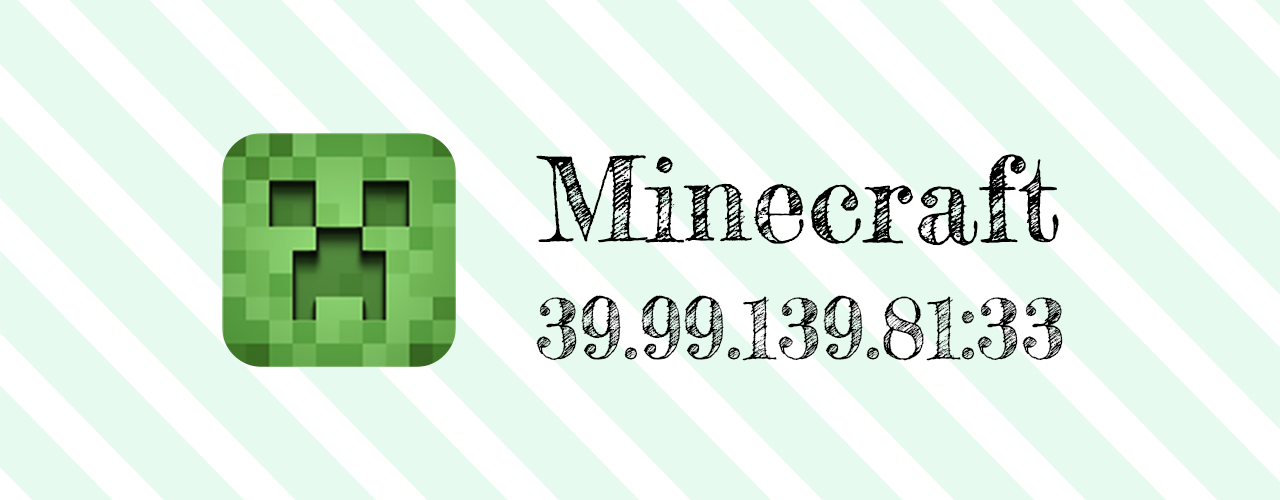
<style>
.page{position:relative;width:1280px;height:500px;background:#e7faef}
.page>*{position:absolute;margin:0}
.t1{font:115.3px "FrederickatheGreat-Regular";color:#000000}
.t2{font:83px "FrederickatheGreat-Regular";color:#000000}
</style>
<div class="page">
<p class="t1" style="left:536px;top:154px;width:523px;height:92px">Minecraft</p>
<p class="t2" style="left:536px;top:295px;width:527px;height:66px">39.99.139.81:33</p>
</div>
